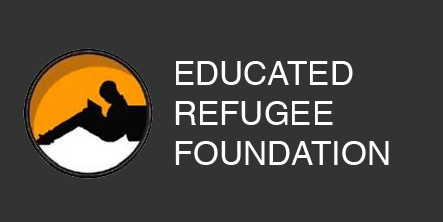
<style>
.page{position:relative;width:443px;height:222px;background:#333333}
.page>*{position:absolute;margin:0}
.t1{font:33.3px "Helvetica";color:#fefdfd}
</style>
<div class="page">
<p class="t1" style="left:175px;top:61px;width:214px;height:104px">EDUCATED<br>REFUGEE<br>FOUNDATION</p>
</div>
